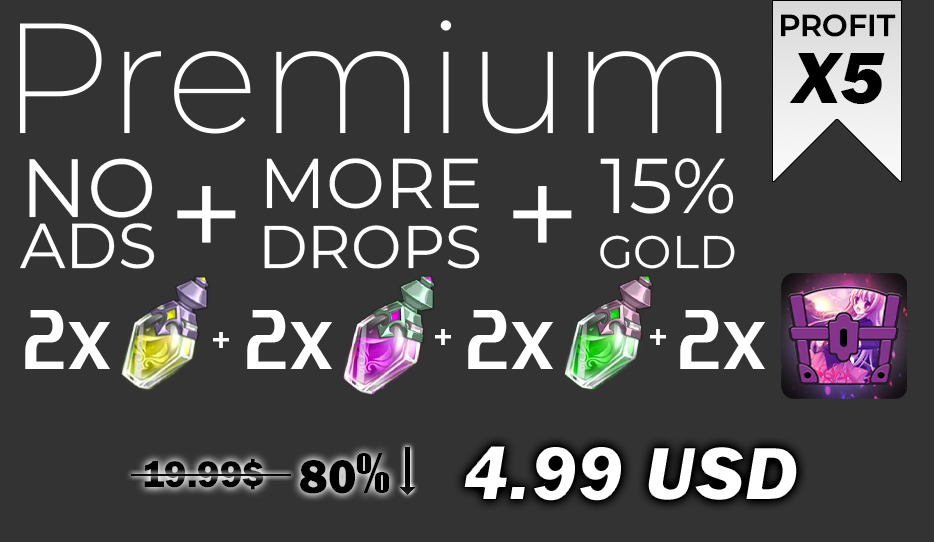
<style>
.page{position:relative;width:934px;height:542px;background:#333333}
.page>*{position:absolute;margin:0}
.t1{font:30.3px "MontserratRoman-SemiBold";letter-spacing:0.002em;color:#000000}
.t2{font:156.4px "MontserratRoman-ExtraLight";letter-spacing:0.002em;color:#ffffff}
.t3{font:75.2px "FranklinGothic-HeavyItalic";letter-spacing:0.002em;color:#000000}
.t4{font:82.5px "MontserratRoman-Regular";letter-spacing:0.002em;color:#ffffff}
.t5{font:70.2px "MontserratRoman-Regular";letter-spacing:0.002em;color:#ffffff}
.t6{font:77.5px "MontserratRoman-Regular";letter-spacing:0.002em;color:#ffffff}
.t7{font:133.3px "MontserratRoman-Regular";letter-spacing:0.002em;color:#ffffff}
.t8{font:63.2px "MontserratRoman-Regular";letter-spacing:0.002em;color:#ffffff}
.t9{font:60.1px "MontserratRoman-Regular";letter-spacing:0.002em;color:#ffffff}
.t10{font:45.5px "MontserratRoman-Regular";letter-spacing:0.002em;color:#ffffff}
.t11{font:72.6px "Unispace-Bold";letter-spacing:0.002em;color:#ffffff}
.t12{font:36px "Unispace-Bold";letter-spacing:0.002em;color:#ffffff}
.t13{font:79.1px "FranklinGothic-HeavyItalic";letter-spacing:0.002em;color:#ffffff}
.t14{font:38.2px "FranklinGothic-Heavy";letter-spacing:0.002em;color:#000000}
.t15{font:48.8px "FranklinGothic-Heavy";letter-spacing:0.002em;color:#000000}
.t16{font:48.8px "Impact";letter-spacing:0.002em;color:#000000}
</style>
<div class="page">
<p class="t1" style="left:781px;top:14px;width:115px;height:23px">PROFIT</p>
<p class="t2" style="left:20px;top:20px;width:702px;height:114px">Premium</p>
<p class="t3" style="left:789px;top:53px;width:96px;height:51px">X5</p>
<p class="t4" style="left:29px;top:158px;width:124px;height:60px">NO</p>
<p class="t5" style="left:266px;top:158px;width:213px;height:51px">MORE</p>
<p class="t6" style="left:600px;top:158px;width:134px;height:56px">15%</p>
<p class="t7" style="left:177px;top:186px;width:59px;height:57px">+</p>
<p class="t7" style="left:513px;top:186px;width:59px;height:57px">+</p>
<p class="t8" style="left:20px;top:223px;width:135px;height:46px">ADS</p>
<p class="t9" style="left:264px;top:225px;width:216px;height:44px">DROPS</p>
<p class="t10" style="left:600px;top:235px;width:135px;height:34px">GOLD</p>
<p class="t11" style="left:25px;top:310px;width:86px;height:59px">2x</p>
<p class="t11" style="left:247px;top:310px;width:86px;height:59px">2x</p>
<p class="t11" style="left:468px;top:310px;width:86px;height:59px">2x</p>
<p class="t11" style="left:680px;top:310px;width:86px;height:59px">2x</p>
<p class="t12" style="left:435px;top:329px;width:16px;height:16px">+</p>
<p class="t12" style="left:650px;top:329px;width:16px;height:16px">+</p>
<p class="t12" style="left:213px;top:332px;width:16px;height:16px">+</p>
<p class="t13" style="left:463px;top:445px;width:335px;height:57px">4.99 USD</p>
<p class="t14" style="left:144px;top:458px;width:120px;height:32px">19.99$</p>
<p class="t15" style="left:300px;top:453px;width:90px;height:41px">80<span class="t16">%</span></p>
</div>
